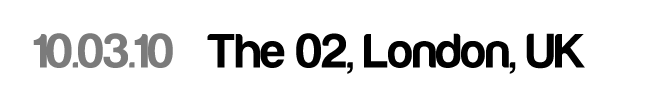
<style>
.page{position:relative;width:650px;height:100px;background:#ffffff}
.page>*{position:absolute;margin:0}
.t1{font:50px "Harabara-Bold";color:#000000}
.t2{font:50px "Harabara-Bold";color:#7b7b7b}
</style>
<div class="page">
<p class="t1" style="left:33px;top:33px;width:552px;height:41px"><span class="t2">10.03.10</span>   The 02, London, UK</p>
</div>
